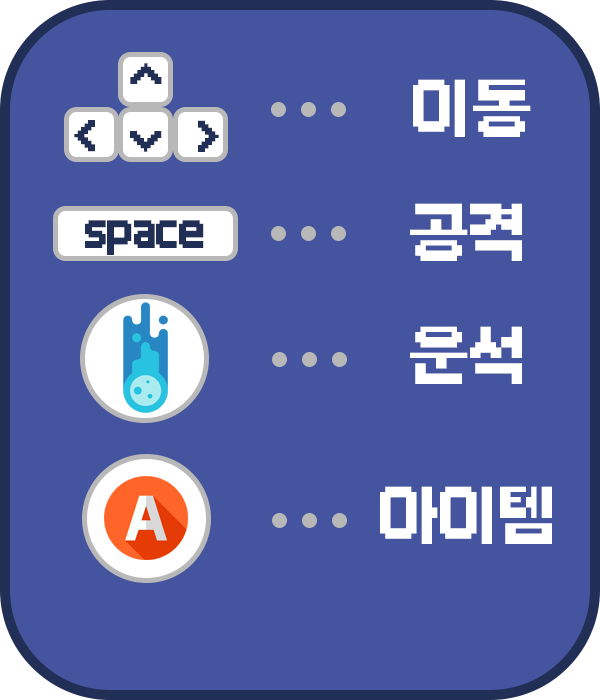
<style>
.page{position:relative;width:600px;height:700px;background:#45549f}
.page>*{position:absolute;margin:0}
.t1{font:41.7px "Galmuri11-Bold";letter-spacing:-0.04em;color:#212e55}
.t2{font:62.5px "Galmuri11-Bold";letter-spacing:-0.04em;color:#ffffff}
</style>
<div class="page">
<p class="t1" style="left:130px;top:63px;width:32px;height:21px;rotate:-90deg">&gt;</p>
<p class="t2" style="left:413px;top:79px;width:118px;height:58px">이동</p>
<p class="t1" style="left:74px;top:120px;width:21px;height:32px;rotate:-180deg">&gt;</p>
<p class="t1" style="left:198px;top:120px;width:21px;height:32px">&gt;</p>
<p class="t1" style="left:130px;top:131px;width:32px;height:21px;rotate:90deg">&gt;</p>
<p class="t2" style="left:410px;top:203px;width:112px;height:58px">공격</p>
<p class="t1" style="left:85px;top:220px;width:119px;height:35px">space</p>
<p class="t2" style="left:410px;top:326px;width:112px;height:58px">운석</p>
<p class="t2" style="left:380px;top:486px;width:172px;height:58px">아이템</p>
</div>
